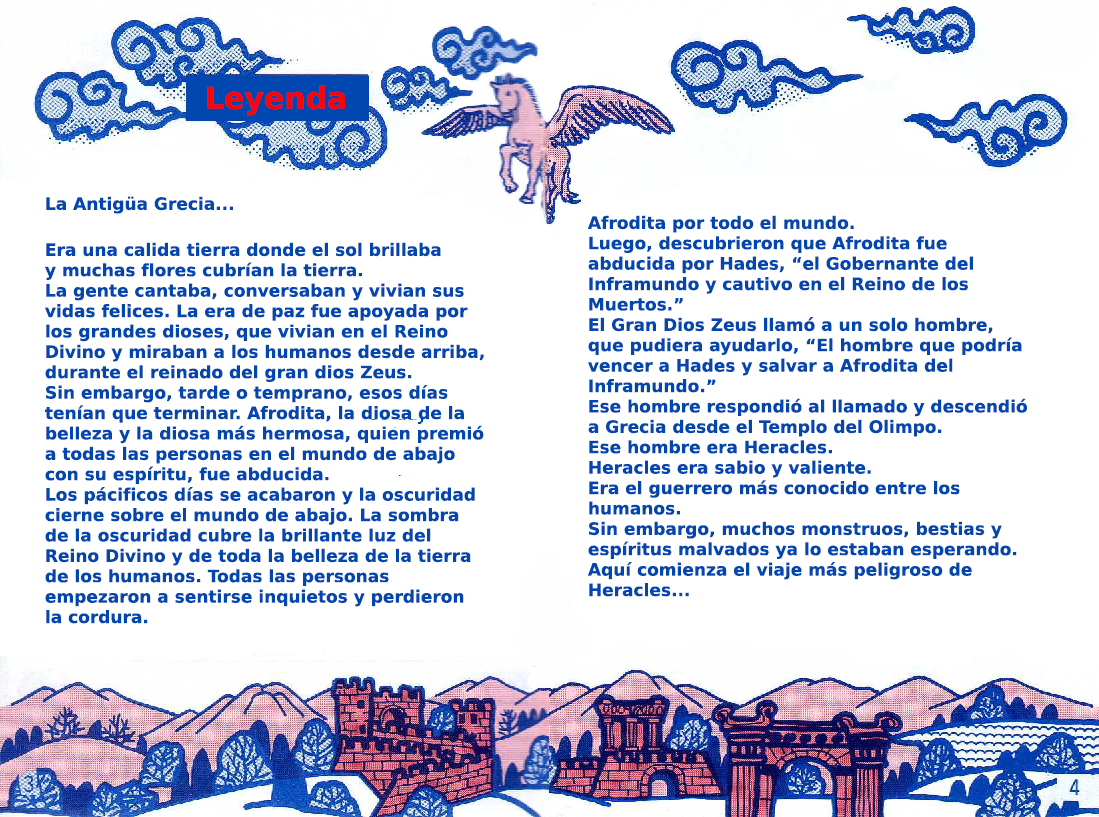
<style>
.page{position:relative;width:1099px;height:817px;background:#ffffff}
.page>*{position:absolute;margin:0}
.t1{font:30px "PrimaSansBT-Bold";color:#fd0305}
.t2{font:17px "PrimaSansBT-Bold";color:#0247af}
</style>
<div class="page">
<p class="t1" style="left:207px;top:85px;width:138px;height:31px">Leyenda</p>
<p class="t2" style="left:46px;top:196px;width:187px;height:18px">La Antigüa Grecia...</p>
<p class="t2" style="left:587px;top:215px;width:440px;height:382px">Afrodita por todo el mundo.<br>Luego, descubrieron que Afrodita fue<br>abducida por Hades, “el Gobernante del<br>Inframundo y cautivo en el Reino de los<br>Muertos.”<br>El Gran Dios Zeus llamó a un solo hombre,<br>que pudiera ayudarlo, “El hombre que podría<br>vencer a Hades y salvar a Afrodita del<br>Inframundo.”<br>Ese hombre respondió al llamado y descendió<br>a Grecia desde el Templo del Olimpo.<br>Ese hombre era Heracles.<br>Heracles era sabio y valiente.<br>Era el guerrero más conocido entre los<br>humanos.<br>Sin embargo, muchos monstruos, bestias y<br>espíritus malvados ya lo estaban esperando.<br>Aquí comienza el viaje más peligroso de<br>Heracles...</p>
<p class="t2" style="left:45px;top:242px;width:439px;height:382px">Era una calida tierra donde el sol brillaba<br>y muchas flores cubrían la tierra.<br>La gente cantaba, conversaban y vivian sus<br>vidas felices. La era de paz fue apoyada por<br>los grandes dioses, que vivian en el Reino<br>Divino y miraban a los humanos desde arriba,<br>durante el reinado del gran dios Zeus.<br>Sin embargo, tarde o temprano, esos días<br>tenían que terminar. Afrodita, la diosa de la<br>belleza y la diosa más hermosa, quien premió<br>a todas las personas en el mundo de abajo <br>con su espíritu, fue abducida.<br>Los pácificos días se acabaron y la oscuridad<br>cierne sobre el mundo de abajo. La sombra<br>de la oscuridad cubre la brillante luz del <br>Reino Divino y de toda la belleza de la tierra de los humanos. Todas las personas<br>empezaron a sentirse inquietos y perdieron<br>la cordura.</p>
</div>
